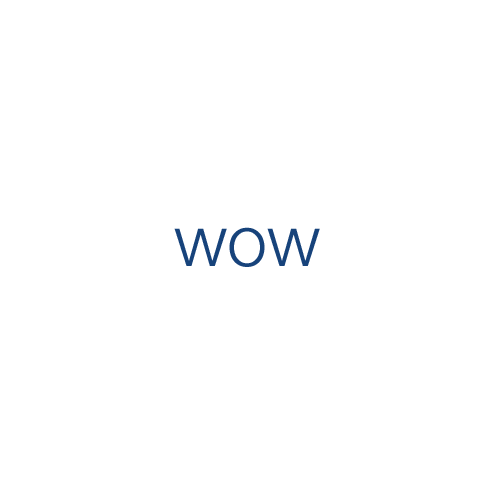
<style>
.page{position:relative;width:500px;height:500px;background:#ffffff}
.page>*{position:absolute;margin:0}
.t1{font:72px "HelveticaNeue-Light";color:#17437b}
</style>
<div class="page">
<p class="t1" style="left:174px;top:227px;width:146px;height:40px">wow</p>
</div>
